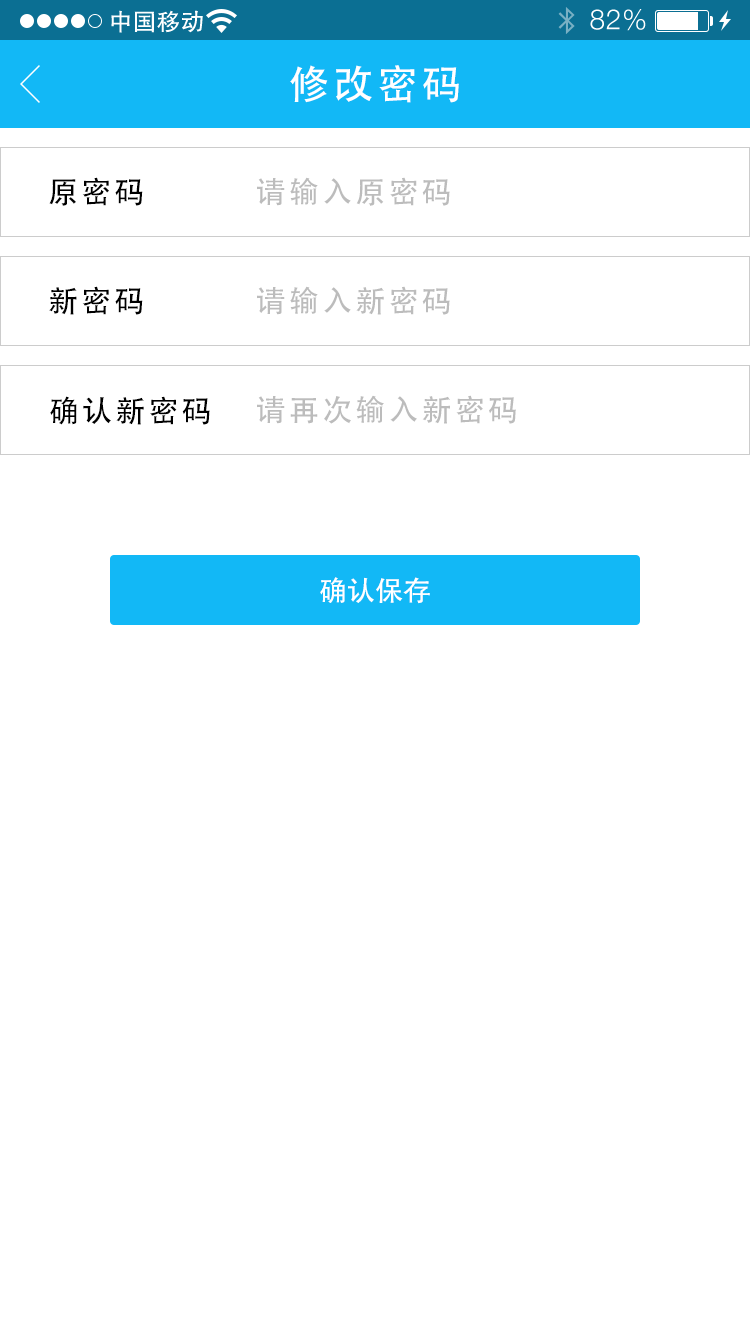
<style>
.page{position:relative;width:750px;height:1334px;background:#ffffff}
.page>*{position:absolute;margin:0}
.t1{font:40px "AdobeHeitiStd-Regular";letter-spacing:0.104em;color:#ffffff}
.t2{font:30px "AdobeHeitiStd-Regular";letter-spacing:0.104em;color:#000000}
.t3{font:30px "AdobeHeitiStd-Regular";letter-spacing:0.104em;color:#bcbcbc}
.t4{font:28px "AdobeHeitiStd-Regular";color:#ffffff}
</style>
<div class="page">
<p class="t1" style="left:290px;top:65px;width:169px;height:38px">修改密码</p>
<p class="t2" style="left:49px;top:177px;width:94px;height:29px">原密码</p>
<p class="t3" style="left:257px;top:177px;width:193px;height:29px">请输入原密码</p>
<p class="t2" style="left:49px;top:286px;width:94px;height:29px">新密码</p>
<p class="t3" style="left:257px;top:286px;width:193px;height:29px">请输入新密码</p>
<p class="t2" style="left:50px;top:396px;width:160px;height:29px">确认新密码</p>
<p class="t3" style="left:257px;top:395px;width:259px;height:29px">请再次输入新密码</p>
<p class="t4" style="left:320px;top:577px;width:110px;height:27px">确认保存</p>
</div>
